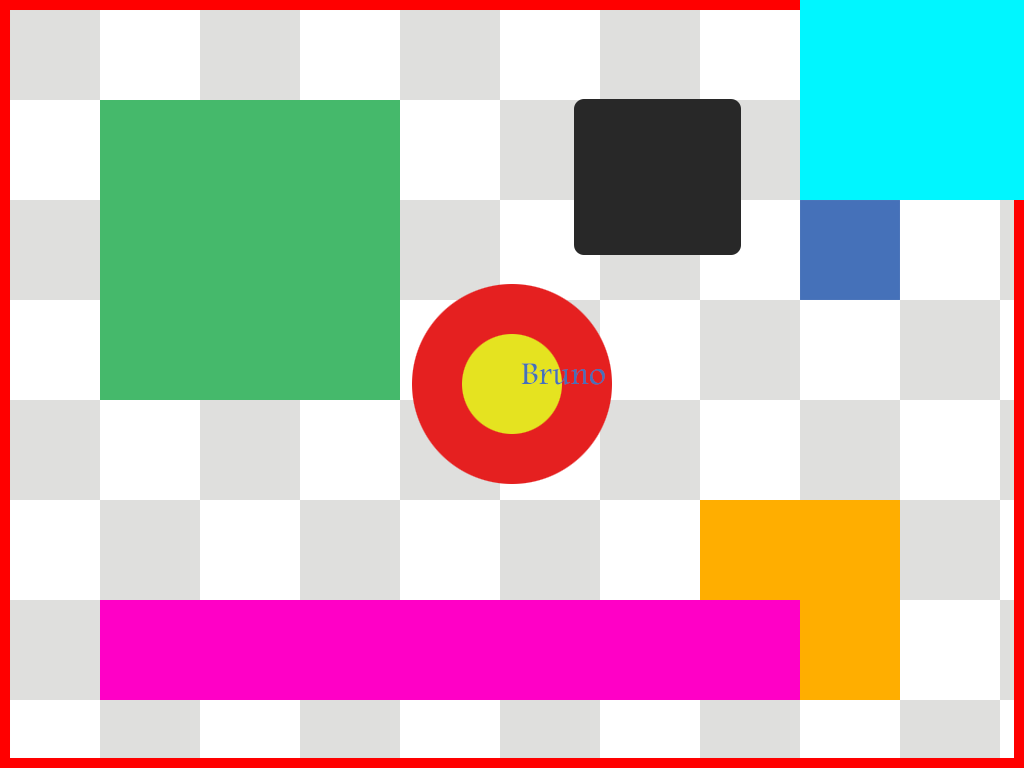
<style>
.page{position:relative;width:1024px;height:768px;background:#ffffff}
.page>*{position:absolute;margin:0}
.t1{font:33px "FootlightMTLight";letter-spacing:0.005em;color:#4571b9}
</style>
<div class="page">
<p class="t1" style="left:521px;top:363px;width:84px;height:22px">Bruno</p>
</div>
